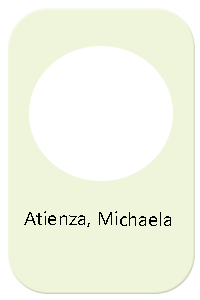
<style>
.page{position:relative;width:200px;height:300px;background:#eef5db}
.page>*{position:absolute;margin:0}
.t1{font:18.6px "NirmalaUI";color:#000000;scale:1.04 1}
</style>
<div class="page">
<p class="t1" style="left:24px;top:211px;width:147px;height:16px">Atienza, Michaela</p>
</div>
